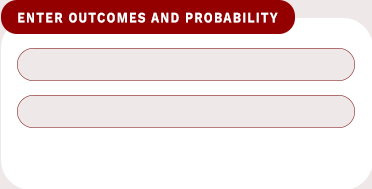
<style>
.page{position:relative;width:372px;height:189px;background:#ffffff}
.page>*{position:absolute;margin:0}
.t1{font:14.7px "WorkSansRoman-Bold";letter-spacing:0.1em;color:#ffffff;scale:0.82 1}
</style>
<div class="page">
<p class="t1" style="left:18px;top:12px;width:260px;height:11px">ENTER OUTCOMES AND PROBABILITY</p>
</div>
